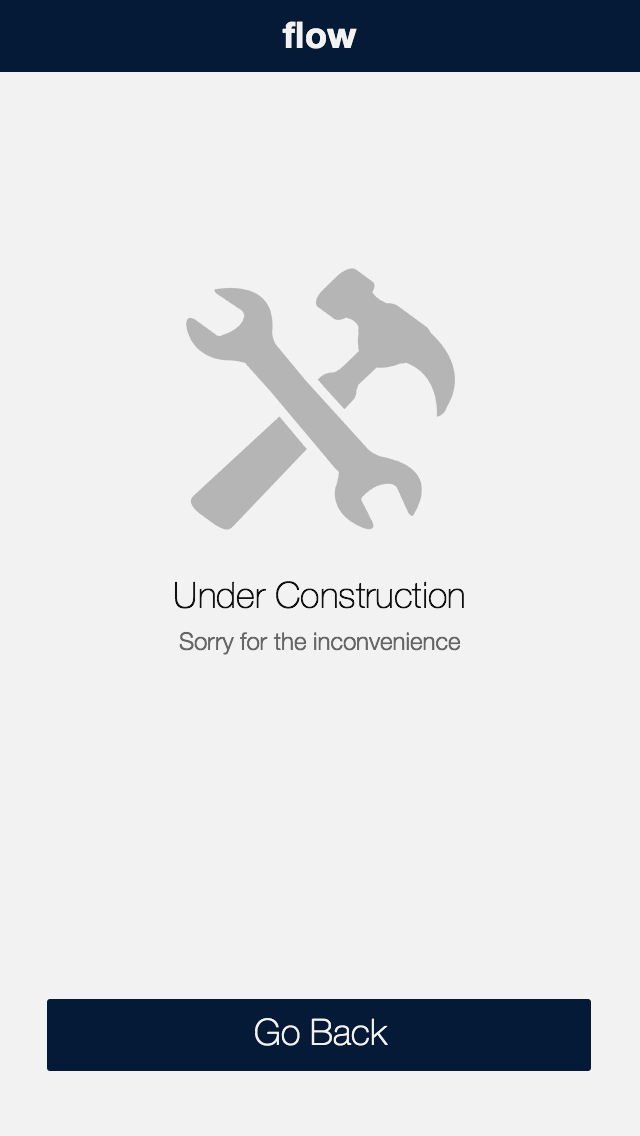
<style>
.page{position:relative;width:640px;height:1136px;background:#f2f2f2}
.page>*{position:absolute;margin:0}
.t1{font:36px "HelveticaNeue-Bold";color:#f2f2f2}
.t2{font:36px "HelveticaNeue-Thin";color:#111111}
.t3{font:24px "HelveticaNeue-Light";color:#666666}
.t4{font:36px "HelveticaNeue-Thin";color:#f2f2f2}
</style>
<div class="page">
<p class="t1" style="left:282px;top:21px;width:75px;height:28px">flow</p>
<p class="t2" style="left:174px;top:581px;width:290px;height:28px">Under Construction</p>
<p class="t3" style="left:179px;top:631px;width:282px;height:24px">Sorry for the inconvenience</p>
<p class="t4" style="left:255px;top:1018px;width:133px;height:28px">Go Back</p>
</div>
